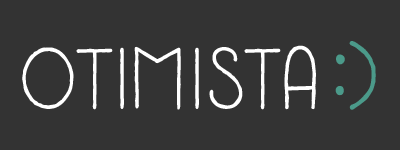
<style>
.page{position:relative;width:400px;height:150px;background:#333333}
.page>*{position:absolute;margin:0}
.t1{font:79.8px "CatalinaTypewriter";color:#4b9a8a;scale:0.92 1}
.t2{font:79.8px "CatalinaClemente";color:#ffffff;scale:0.92 1}
</style>
<div class="page">
<p class="t1" style="left:335px;top:41px;width:41px;height:69px">:)</p>
<p class="t2" style="left:22px;top:45px;width:294px;height:65px">OTIMISTA</p>
</div>
